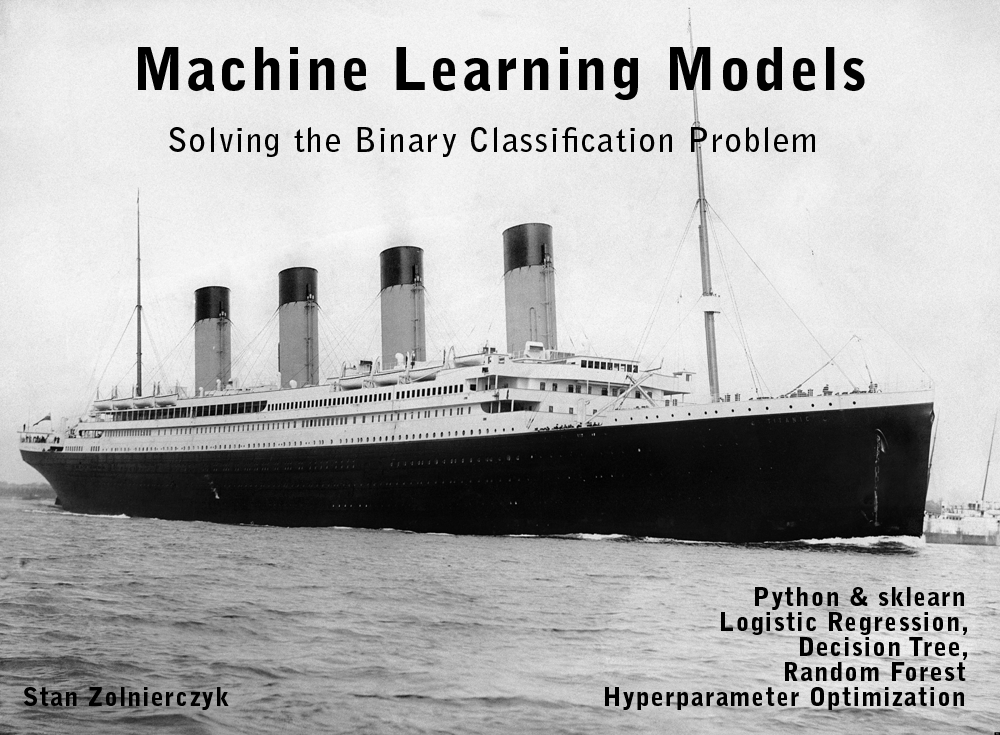
<style>
.page{position:relative;width:1000px;height:735px}
.page>*{position:absolute;margin:0}
.t1{font:58.3px "BellGothicStd-Black";letter-spacing:0.05em;color:#000000}
.t2{font:33.3px "BellGothicStd-Bold";letter-spacing:0.05em;color:#000000}
.t3{font:25px/25px "BellGothicStd-Black";letter-spacing:0.05em;color:#000000}
.t4{font:25px "BellGothicStd-Black";letter-spacing:0.05em;color:#000000}
</style>
<div class="page">
<p class="t1" style="left:138px;top:47px;width:727px;height:53px">Machine Learning Models</p>
<p class="t2" style="left:169px;top:127px;width:646px;height:30px">Solving the Binary Classification Problem</p>
<p class="t3" style="left:605px;top:587px;width:362px;height:123px;text-align:right">Python &amp; sklearn<br>Logistic Regression,<br>Decision Tree,<br>Random Forest<br>Hyperparameter Optimization</p>
<p class="t4" style="left:24px;top:687px;width:205px;height:23px">Stan Zolnierczyk</p>
</div>
